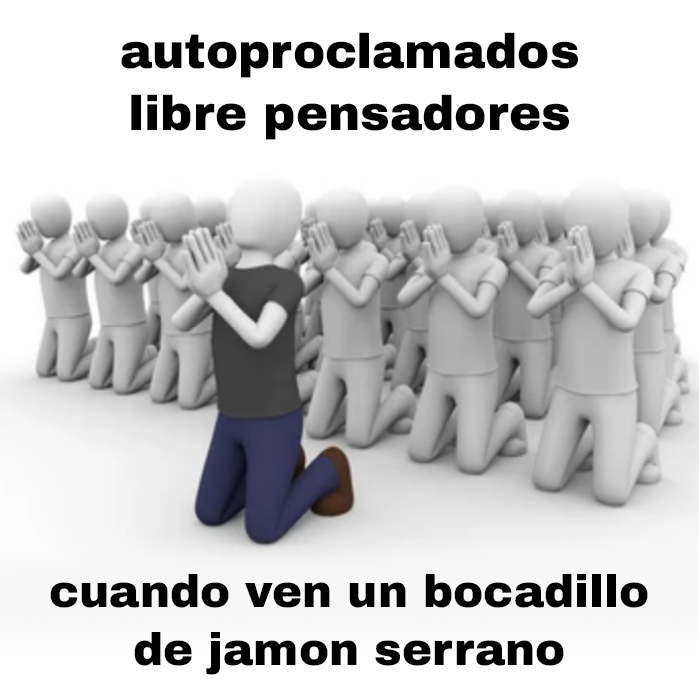
<style>
.page{position:relative;width:699px;height:699px;background:#ffffff}
.page>*{position:absolute;margin:0}
.t1{font:48.4px "ArchivoBlack-Regular";color:#000000}
.t2{font:45.3px "ArchivoBlack-Regular";color:#000000}
</style>
<div class="page">
<p class="t1" style="left:121px;top:32px;width:457px;height:108px;text-align:center">autoproclamados<br>libre pensadores</p>
<p class="t2" style="left:50px;top:574px;width:598px;height:101px;text-align:center">cuando ven un bocadillo<br>de jamon serrano</p>
</div>
